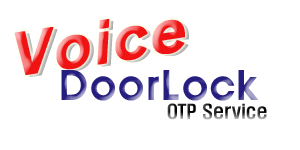
<style>
.page{position:relative;width:300px;height:150px;background:#ffffff}
.page>*{position:absolute;margin:0}
.t1{font:55px "Yj-TEUNTEUN--Bold";font-weight:bold;font-style:italic;scale:1.2 1}
.t2{font:40px "HYtbrB";color:#251e7e}
.t3{font:18px "H2hdrM"}
.t4{font:24px "H2gsrB";font-style:italic;scale:1.2 1}
</style>
<div class="page">
<p class="t1" style="left:14px;top:19px;width:171px;height:56px;rotate:-9deg">Voice</p>
<p class="t2" style="left:61px;top:70px;width:198px;height:31px">DoorLock</p>
<p class="t3" style="left:167px;top:103px;width:100px;height:17px"><span class="t4"><br></span>OTP Service</p>
</div>
